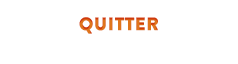
<style>
.page{position:relative;width:238px;height:64px;background:#ffffff}
.page>*{position:absolute;margin:0}
.t1{font:18px "BrandonGrotesque-Black";letter-spacing:0.025em;color:#df751b;font-weight:bold}
</style>
<div class="page">
<p class="t1" style="left:79px;top:17px;width:79px;height:17px">QUITTER</p>
</div>
